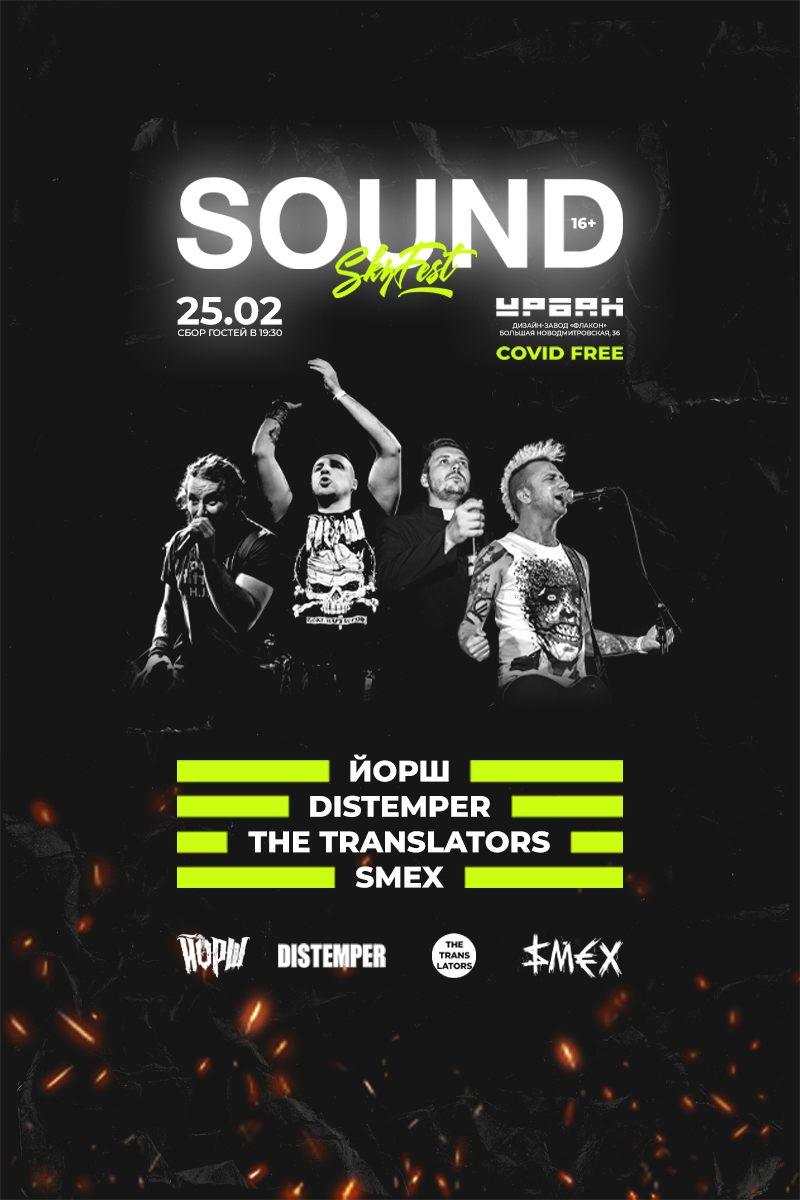
<style>
.page{position:relative;width:800px;height:1200px;background:#161616}
.page>*{position:absolute;margin:0}
.t1{font:14.7px "Montserrat-ExtraBold";color:#ffffff;text-transform:uppercase}
.t2{font:39.4px "Montserrat-Bold";color:#ffffff;text-transform:uppercase}
.t3{font:9.4px "Montserrat-Medium";color:#ffffff;text-transform:uppercase}
.t4{font:6.3px "Montserrat-Medium";color:#ffffff;text-transform:uppercase}
.t5{font:29.5px "Montserrat-ExtraBold";color:#ffffff;text-transform:uppercase}
</style>
<div class="page">
<p class="t1" style="left:571px;top:217px;width:25px;height:12px">16+</p>
<p class="t2" style="left:176px;top:296px;width:106px;height:29px">25.02</p>
<p class="t3" style="left:178px;top:327px;width:104px;height:9px">Сбор гостей в 19:30</p>
<p class="t4" style="left:500px;top:322px;width:120px;height:15px;text-align:center">Дизайн-завод «Флакон»<br>Большая Новодмитровская, 36</p>
<p class="t5" style="left:248px;top:754px;width:302px;height:134px;text-align:center">Йорш<br>Distemper<br>The Translators<br>Smex</p>
</div>
